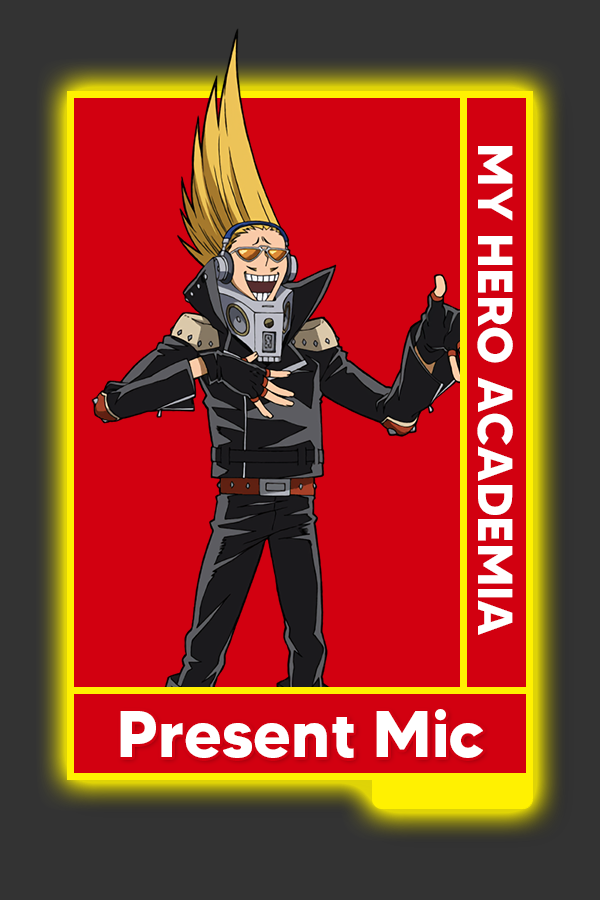
<style>
.page{position:relative;width:600px;height:900px;background:#d20010}
.page>*{position:absolute;margin:0}
.t1{font:48.8px "MADETOMMY-Bold";color:#ffffff}
.t2{font:65.2px "MADETOMMY-Bold";color:#ffffff}
</style>
<div class="page">
<p class="t1" style="left:477px;top:146px;width:36px;height:489px;rotate:90deg">MY HERO ACADEMIA</p>
<p class="t2" style="left:120px;top:709px;width:363px;height:49px">Present Mic</p>
</div>
